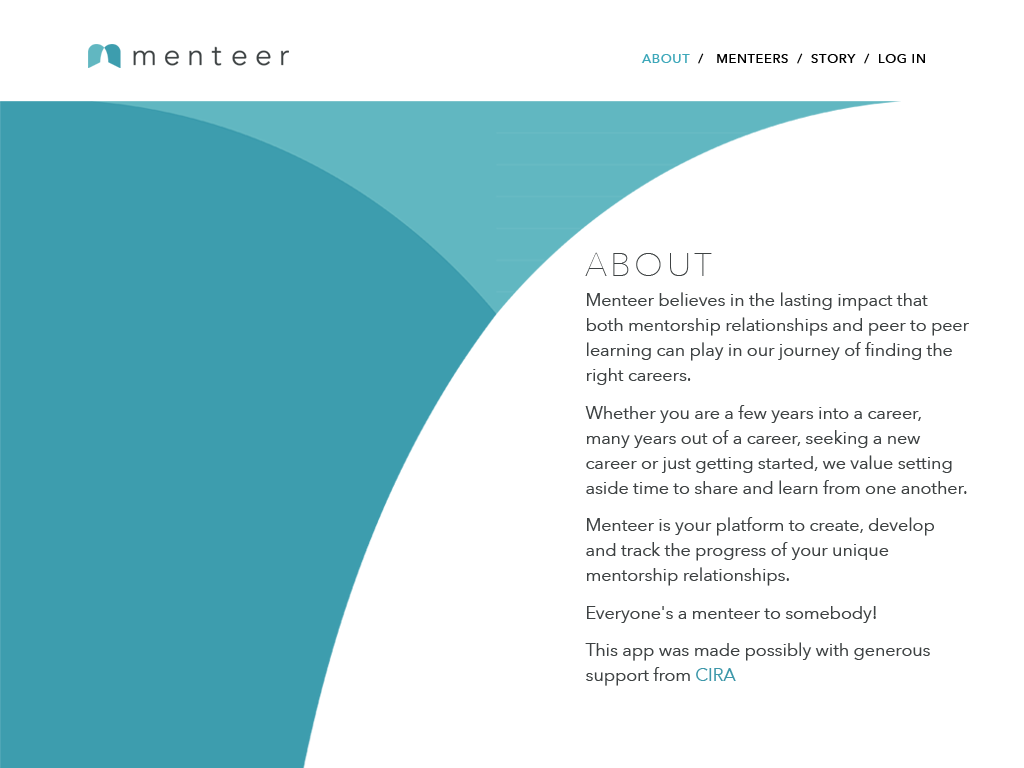
<style>
.page{position:relative;width:1024px;height:768px;background:#ffffff}
.page>*{position:absolute;margin:0}
.t1{font:12.5px "AvenirNext-Medium";letter-spacing:0.075em;color:#000000}
.t2{font:12.5px "AvenirNext-Medium";letter-spacing:0.075em;color:#3ea8ba}
.t3{font:33.3px "AvenirNext-UltraLight";letter-spacing:0.1em;color:#3e4243}
.t4{font:17.7px/25px "AvenirNext-Regular";color:#3e4243}
.t5{font:17.7px/25px "AvenirNext-Regular";color:#3e98aa}
</style>
<div class="page">
<p class="t1" style="left:641px;top:53px;width:284px;height:11px"><span class="t2">ABOUT</span>  /   MENTEERS  /  STORY  /  LOG IN</p>
<p class="t3" style="left:585px;top:252px;width:127px;height:24px">ABOUT</p>
<p class="t4" style="left:585px;top:292px;width:384px;height:394px">Menteer believes in the lasting impact that both mentorship relationships and peer to peer learning can play in our journey of finding the right careers.<br><br>Whether you are a few years into a career, many years out of a career, seeking a new career or just getting started, we value setting aside time to share and learn from one another. <br><br>Menteer is your platform to create, develop and track the progress of your unique mentorship relationships.<br><br>Everyone's a menteer to somebody!<br><br>This app was made possibly with generous support from <span class="t5">CIRA</span></p>
</div>
